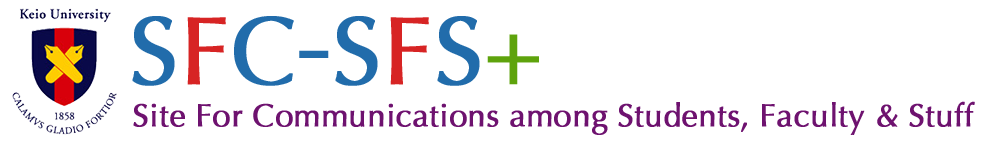
<style>
.page{position:relative;width:1000px;height:144px;background:#ffffff}
.page>*{position:absolute;margin:0}
.t1{font:96px "Optima-Regular";color:#216cab;font-weight:bold}
.t2{font:96px "Optima-Regular";color:#d72424;font-weight:bold}
.t3{font:96px "KozGoPr6N-Regular";color:#216cab;font-weight:bold}
.t4{font:96px "Optima-Regular";color:#5ea30c;font-weight:bold}
.t5{font:32px "Optima-Regular";color:#6e126f;font-weight:bold}
</style>
<div class="page">
<p class="t1" style="left:132px;top:16px;width:407px;height:70px">S<span class="t2">F</span>C<span class="t3">-</span>S<span class="t2">F</span>S<span class="t4">+</span></p>
<p class="t5" style="left:133px;top:101px;width:842px;height:34px">Site For Communications among Students, Faculty &amp; Stuff</p>
</div>
